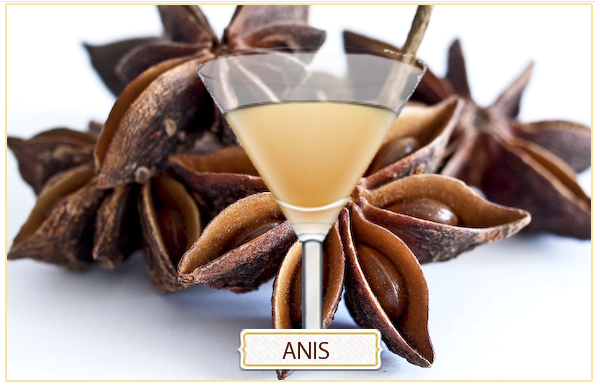
<style>
.page{position:relative;width:600px;height:390px}
.page>*{position:absolute;margin:0}
.t1{font:22.4px "KozGoPro-Regular";color:#441106}
</style>
<div class="page">
<p class="t1" style="left:282px;top:342px;width:47px;height:17px">ANIS</p>
</div>
